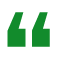
<style>
.page{position:relative;width:60px;height:57px;background:#ffffff}
.page>*{position:absolute;margin:0}
.t1{font:166.7px "BebasNeue";color:#128b2c}
</style>
<div class="page">
<p class="t1" style="left:7px;top:12px;width:43px;height:35px">“</p>
</div>
